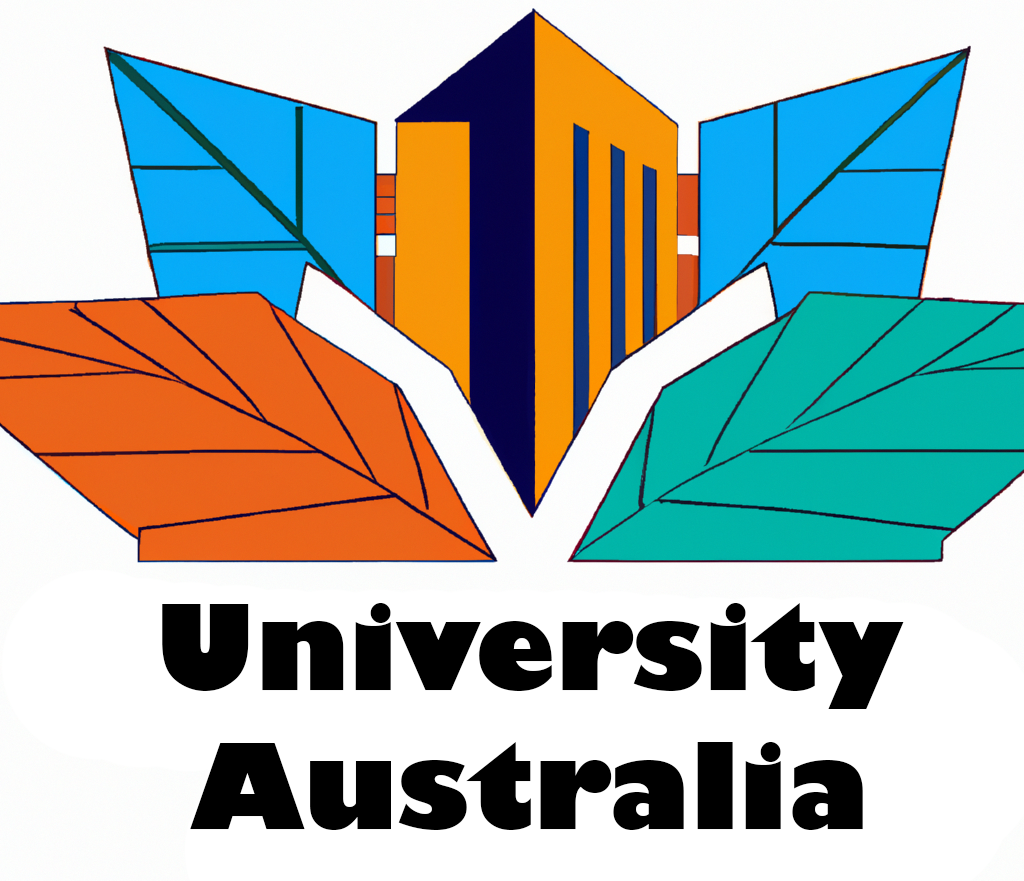
<style>
.page{position:relative;width:1024px;height:881px;background:#ffffff}
.page>*{position:absolute;margin:0}
.t1{font:116px "GillSans-UltraBold";color:#000000}
</style>
<div class="page">
<p class="t1" style="left:162px;top:603px;width:742px;height:227px;text-align:center">University<br>Australia</p>
</div>
